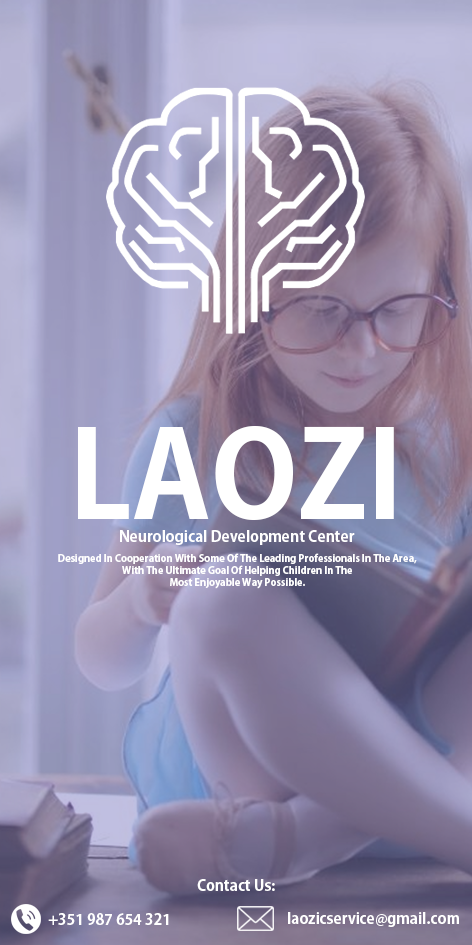
<style>
.page{position:relative;width:472px;height:945px}
.page>*{position:absolute;margin:0}
.t1{font:120px "AdobeGothicStd-Bold";color:#ffffff}
.t2{font:15px "AdobeGothicStd-Bold";color:#ffffff}
.t3{font:10px "AdobeGothicStd-Bold";color:#ffffff}
</style>
<div class="page">
<p class="t1" style="left:78px;top:426px;width:316px;height:94px">LAOZI</p>
<p class="t2" style="left:120px;top:530px;width:235px;height:15px">Neurological Development Center</p>
<p class="t3" style="left:58px;top:553px;width:359px;height:36px;text-align:center">Designed In Cooperation With Some Of The Leading Professionals In The Area,<br> With The Ultimate Goal Of Helping Children In The <br>Most Enjoyable Way Possible.</p>
<p class="t2" style="left:197px;top:879px;width:78px;height:12px">Contact Us:</p>
<p class="t2" style="left:48px;top:913px;width:121px;height:12px">+351 987 654 321</p>
<p class="t2" style="left:288px;top:912px;width:171px;height:15px">laozicservice@gmail.com</p>
</div>
